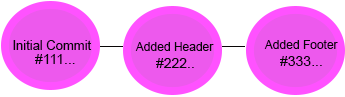
<style>
.page{position:relative;width:345px;height:97px;background:#ffffff}
.page>*{position:absolute;margin:0}
.t1{font:13px "ArialMT";color:#070707}
.t2{font:12px/60px "ArialMT";color:#070707}
.t3{font:14px/60px "ArialMT";color:#070707}
.t4{font:14px "ArialMT";color:#070707}
.t5{font:12px "ArialMT";color:#070707}
</style>
<div class="page">
<p class="t1" style="left:13px;top:40px;width:79px;height:10px">Initial Commit</p>
<p class="t2" style="left:264px;top:40px;width:74px;height:9px">Added Footer<br><span class="t3">#</span></p>
<p class="t4" style="left:35px;top:54px;width:40px;height:10px">#111...</p>
<p class="t5" style="left:135px;top:42px;width:79px;height:9px">Added Header</p>
<p class="t4" style="left:156px;top:58px;width:38px;height:10px">#222..</p>
<p class="t4" style="left:280px;top:56px;width:42px;height:10px">#333...</p>
</div>
